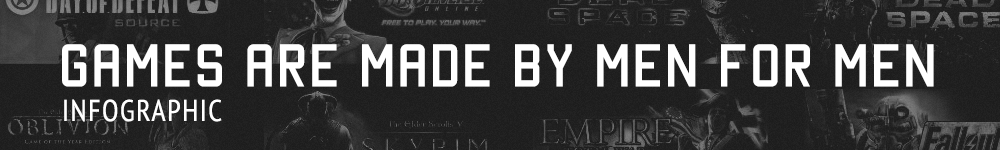
<style>
.page{position:relative;width:1000px;height:150px}
.page>*{position:absolute;margin:0}
.t1{font:48px "Manteka";letter-spacing:0.05em;color:#ffffff}
.t2{font:30px "PTSans-Narrow";letter-spacing:0.05em;color:#ffffff}
</style>
<div class="page">
<p class="t1" style="left:62px;top:44px;width:872px;height:43px">GAMES ARE MADE BY MEN FOR MEN</p>
<p class="t2" style="left:64px;top:99px;width:158px;height:23px">INFOGRAPHIC</p>
</div>
